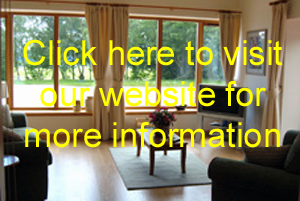
<style>
.page{position:relative;width:300px;height:201px}
.page>*{position:absolute;margin:0}
.t1{font:34.5px "ArialMT";color:#ffff00}
</style>
<div class="page">
<p class="t1" style="left:23px;top:39px;width:260px;height:109px;text-align:center">Click here to visit our website for more information</p>
</div>
